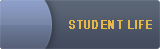
<style>
.page{position:relative;width:160px;height:49px}
.page>*{position:absolute;margin:0}
.t1{font:11.7px "ArialMT";letter-spacing:0.1em;color:#e6b849;font-weight:bold;scale:0.84 1}
</style>
<div class="page">
<p class="t1" style="left:69px;top:20px;width:83px;height:9px">STUDENT LIFE</p>
</div>
